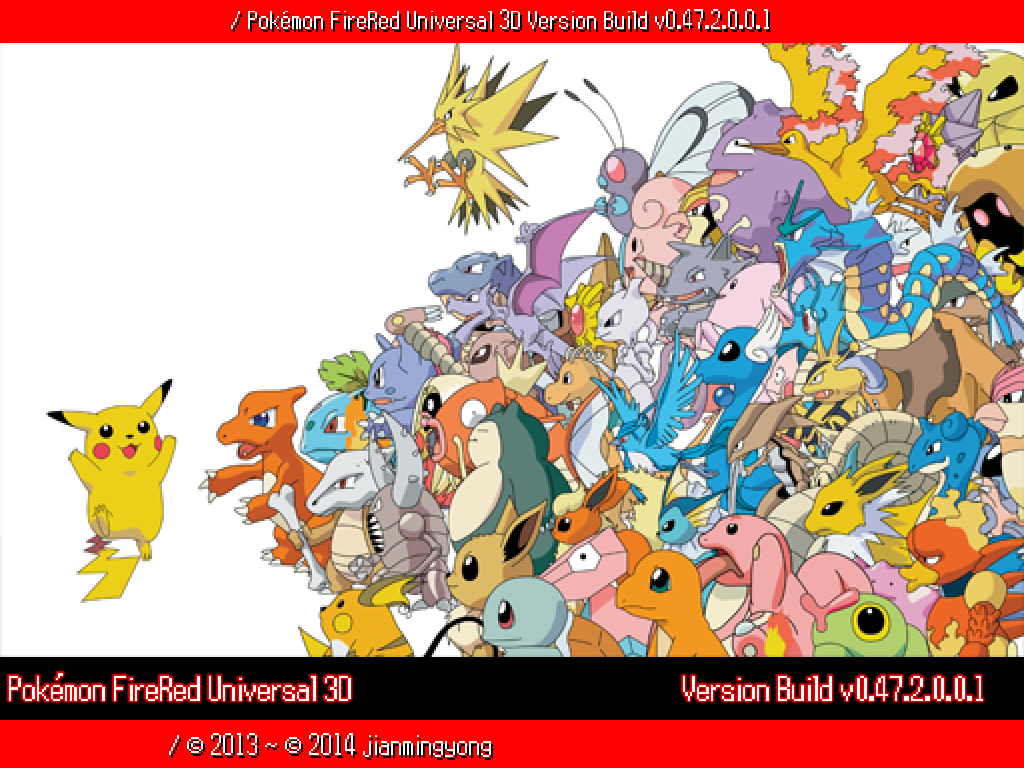
<style>
.page{position:relative;width:1024px;height:768px;background:#ffffff}
.page>*{position:absolute;margin:0}
.t1{font:24px "Power-Red-and-Blue-Intl";color:#ffffff}
.t2{font:30px "Power-Red-and-Blue";color:#fefefe}
.t3{font:26px "Power-Red-and-Blue-Intl";color:#ffffff}
.t4{font:32px "Power-Red-and-Blue-Intl";color:#ffffff}
</style>
<div class="page">
<p class="t1" style="left:231px;top:9px;width:538px;height:20px">/ Pokémon FireRed Universal 3D Version Build v0.47.2.0.0.1</p>
<p class="t2" style="left:9px;top:673px;width:342px;height:28px">Pokémon FireRed Universal 3D</p>
<p class="t2" style="left:683px;top:676px;width:300px;height:25px">Version Build v0.47.2.0.0.1</p>
<p class="t3" style="left:169px;top:733px;width:322px;height:24px"><span class="t4"> </span>/ © 2013 ~ © 2014 jianmingyong</p>
</div>
